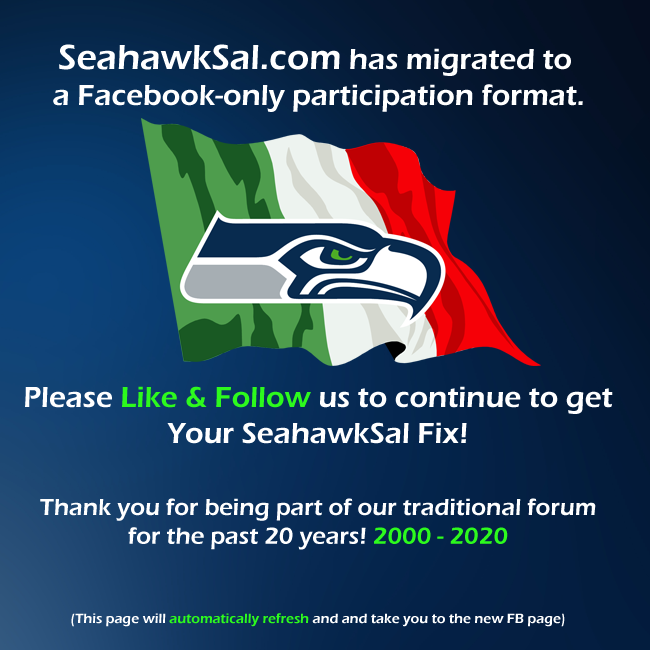
<style>
.page{position:relative;width:650px;height:650px}
.page>*{position:absolute;margin:0}
.t1{font:30px "ErasITC-Demi";color:#ffffff}
.t2{font:36px "ErasITC-Demi";color:#ffffff}
.t3{font:24px "ErasITC-Demi";color:#ffffff}
.t4{font:30px "ErasITC-Demi";color:#2dfa1d}
.t5{font:24px "ErasITC-Demi";color:#2dfa1d}
.t6{font:14px "ErasITC-Demi";color:#ffffff}
.t7{font:14px "ErasITC-Demi";color:#2dfa1d}
</style>
<div class="page">
<p class="t1" style="left:53px;top:44px;width:530px;height:68px;text-align:center"><span class="t2">SeahawkSal.com</span> has migrated to<br> a Facebook-only participation format.</p>
<p class="t3" style="left:25px;top:386px;width:588px;height:241px;text-align:center"><span class="t1">Please </span><span class="t4">Like &amp; Follow</span><span class="t1"> us to continue to get<br>Your SeahawkSal Fix!<br><br><br></span>Thank you for being part of our traditional forum<br>for the past 20 years! <span class="t5">2000 - 2020<br><br></span><span class="t6"><br><br>(This page will </span><span class="t7">automatically refresh</span><span class="t6"> and and take you to the new FB page)</span></p>
</div>
